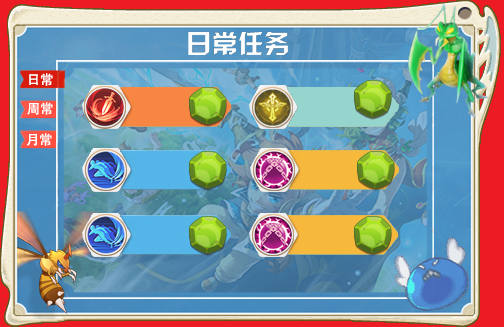
<style>
.page{position:relative;width:504px;height:327px}
.page>*{position:absolute;margin:0}
.t1{font:13.3px "AdobeHeitiStd-Regular";color:#ffffff}
</style>
<div class="page">
<p class="t1" style="left:29px;top:73px;width:24px;height:13px">日常</p>
<p class="t1" style="left:27px;top:102px;width:26px;height:13px">周常</p>
<p class="t1" style="left:26px;top:133px;width:26px;height:13px">月常</p>
</div>
